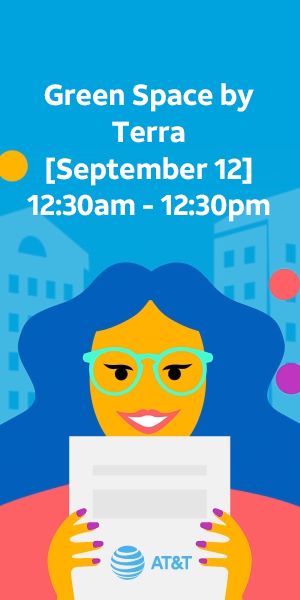
<style>
.page{position:relative;width:300px;height:600px;background:#00a3dd}
.page>*{position:absolute;margin:0}
.t1{font:29.1px/36.8px "ATTAleckSans_Bold";letter-spacing:-0.014em;color:#ffffff}
</style>
<div class="page">
<p class="t1" style="left:27px;top:83px;width:243px;height:139px;text-align:center">Green Space by Terra<br>[September 12] <br>12:30am - 12:30pm</p>
</div>
